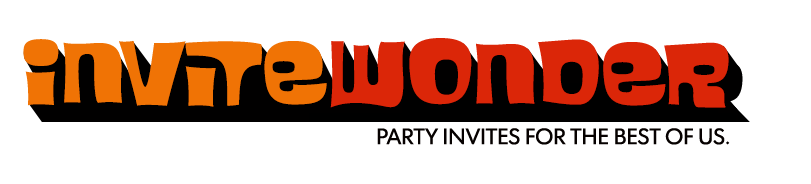
<style>
.page{position:relative;width:811px;height:184px;background:#ffffff}
.page>*{position:absolute;margin:0}
.t1{font:105.6px "Blackcurrant-Squash";letter-spacing:-0.022em;color:#f07305}
.t2{font:105.6px "Blackcurrant-Squash";letter-spacing:-0.022em;color:#db2608}
.t3{font:22.2px "FuturaToday-Normal";color:#060100;text-transform:uppercase}
</style>
<div class="page">
<p class="t1" style="left:23px;top:39px;width:304px;height:68px">invite</p>
<p class="t2" style="left:330px;top:38px;width:399px;height:70px">wonder</p>
<p class="t3" style="left:377px;top:128px;width:353px;height:17px">party inviteS for the best of us.</p>
</div>
